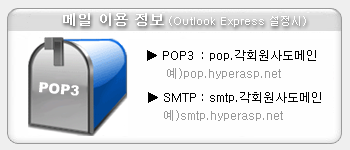
<style>
.page{position:relative;width:350px;height:150px;background:#fefefe}
.page>*{position:absolute;margin:0}
.t1{font:11px "Dotum";color:#ffffff}
.t2{font:14px "Dotum";color:#ffffff;font-weight:bold}
.t3{font:12px/18px "Dotum";color:#000000}
.t4{font:12px/18px "Dotum";color:#999999}
.t5{font:14px "Arial-Black";color:#ffffff}
</style>
<div class="page">
<p class="t1" style="left:63px;top:13px;width:243px;height:14px"><span class="t2">메일 이용 정보 </span>(Outlook Express 설정시)</p>
<p class="t3" style="left:147px;top:50px;width:169px;height:29px">▶ POP3  : pop.각회원사도메인<br>       <span class="t4">예)pop.hyperasp.net</span></p>
<p class="t5" style="left:39px;top:82px;width:40px;height:14px;rotate:5deg">POP3</p>
<p class="t3" style="left:148px;top:92px;width:173px;height:29px">▶ SMTP : smtp.각회원사도메인 <br> <span class="t4">     예)smtp.hyperasp.net</span></p>
</div>
